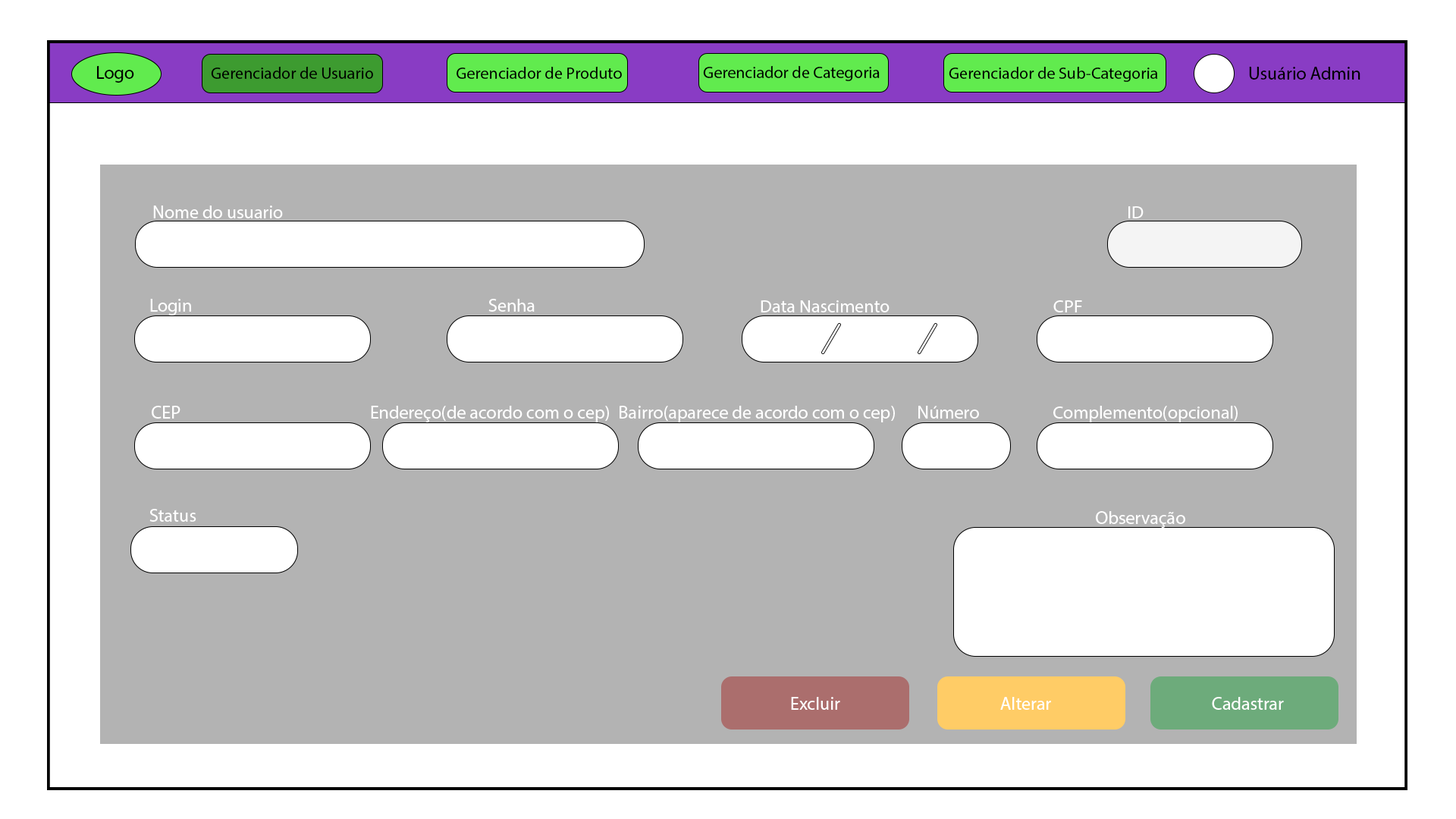
<style>
.page{position:relative;width:1456px;height:819px;background:#ffffff}
.page>*{position:absolute;margin:0}
.t1{font:18.2px "MyriadPro-Regular";color:#000000}
.t2{font:16.6px "MyriadPro-Regular";color:#000000}
.t3{font:18.2px "MyriadPro-Regular";color:#ffffff}
.t4{font:18.1px "MyriadPro-Regular";color:#ffffff}
</style>
<div class="page">
<p class="t1" style="left:97px;top:66px;width:37px;height:17px">Logo</p>
<p class="t2" style="left:703px;top:66px;width:177px;height:15px">Gerenciador de Categoria</p>
<p class="t2" style="left:211px;top:67px;width:162px;height:12px">Gerenciador de Usuario</p>
<p class="t2" style="left:457px;top:67px;width:165px;height:12px">Gerenciador de Produto</p>
<p class="t2" style="left:949px;top:67px;width:209px;height:15px">Gerenciador de Sub-Categoria</p>
<p class="t1" style="left:1249px;top:67px;width:111px;height:13px">Usuário Admin</p>
<p class="t3" style="left:153px;top:206px;width:130px;height:12px">Nome do usuario</p>
<p class="t4" style="left:1128px;top:206px;width:16px;height:12px">ID</p>
<p class="t3" style="left:150px;top:299px;width:41px;height:16px">Login</p>
<p class="t3" style="left:488px;top:299px;width:47px;height:13px">Senha</p>
<p class="t4" style="left:761px;top:300px;width:129px;height:12px">Data Nascimento</p>
<p class="t4" style="left:1053px;top:300px;width:29px;height:12px">CPF</p>
<p class="t3" style="left:152px;top:406px;width:28px;height:13px">CEP</p>
<p class="t3" style="left:371px;top:406px;width:238px;height:16px">Endereço(de acordo com o cep)</p>
<p class="t3" style="left:620px;top:406px;width:275px;height:16px">Bairro(aparece de acordo com o cep)</p>
<p class="t3" style="left:918px;top:406px;width:61px;height:13px">Número</p>
<p class="t4" style="left:1053px;top:406px;width:185px;height:16px">Complemento(opcional)</p>
<p class="t3" style="left:149px;top:509px;width:47px;height:13px">Status</p>
<p class="t3" style="left:1096px;top:511px;width:89px;height:17px">Observação</p>
<p class="t3" style="left:791px;top:697px;width:49px;height:13px">Excluir</p>
<p class="t3" style="left:1000px;top:697px;width:51px;height:13px">Alterar</p>
<p class="t3" style="left:1212px;top:697px;width:72px;height:13px">Cadastrar</p>
</div>
